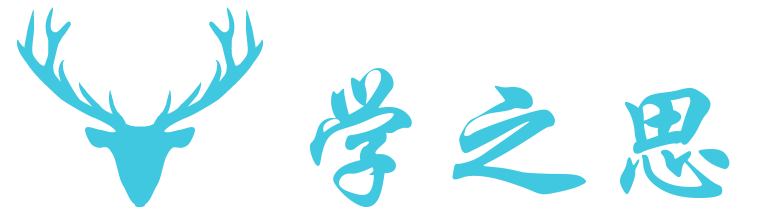
<style>
.page{position:relative;width:780px;height:213px;background:#ffffff}
.page>*{position:absolute;margin:0}
.t1{font:150px "STXingkai";color:#3fc8e0}
</style>
<div class="page">
<p class="t1" style="left:309px;top:68px;width:421px;height:139px">学之思</p>
</div>
